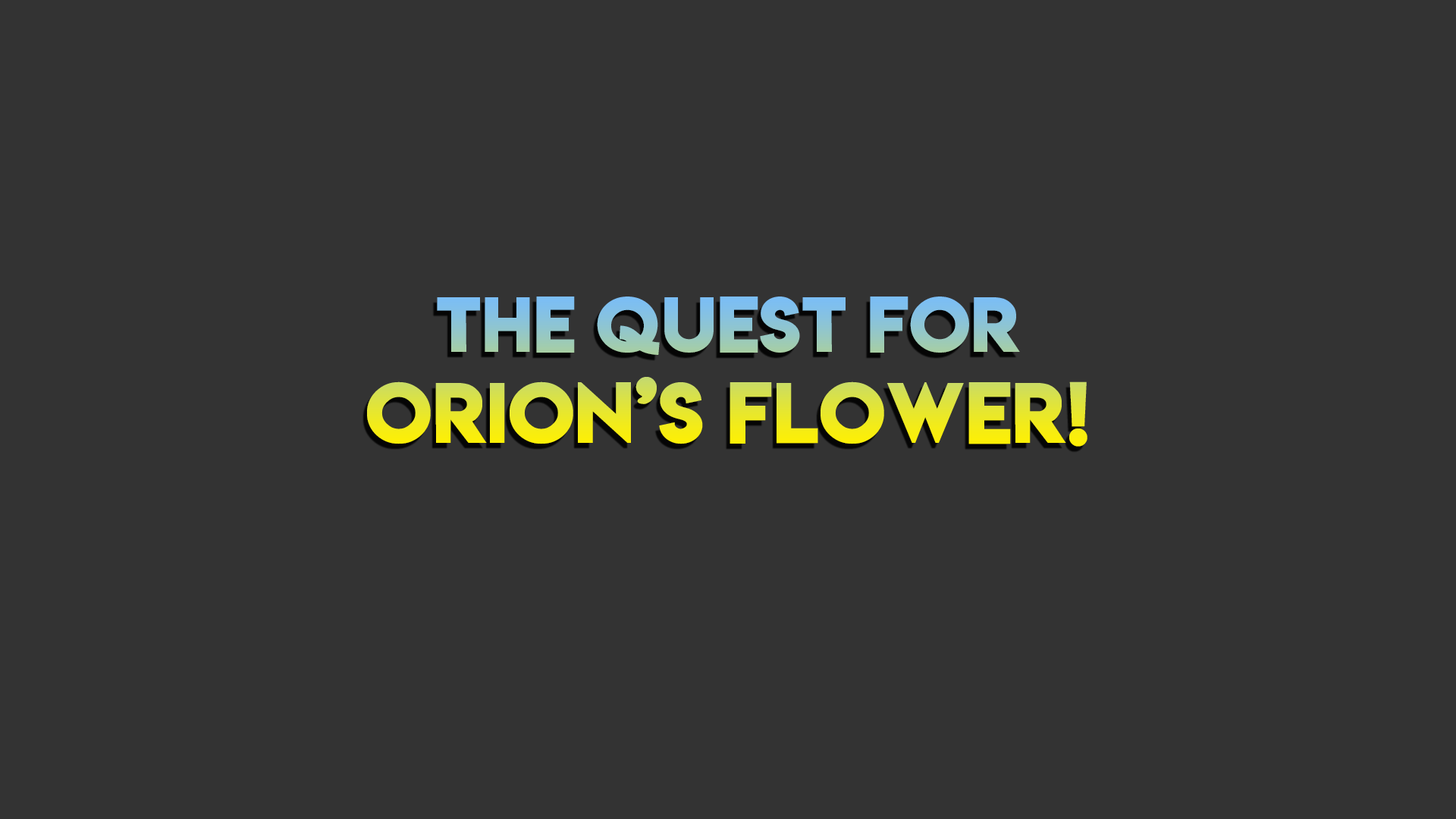
<style>
.page{position:relative;width:1456px;height:819px;background:#333333}
.page>*{position:absolute;margin:0}
.t1{font:75.8px "LemonMilkbold"}
.t2{font:69.5px "LemonMilkbold"}
</style>
<div class="page">
<p class="t1" style="left:367px;top:297px;width:720px;height:150px;text-align:center"><span class="t2">THE QUEST FOR<br></span>ORION’S FLOWER!</p>
</div>
